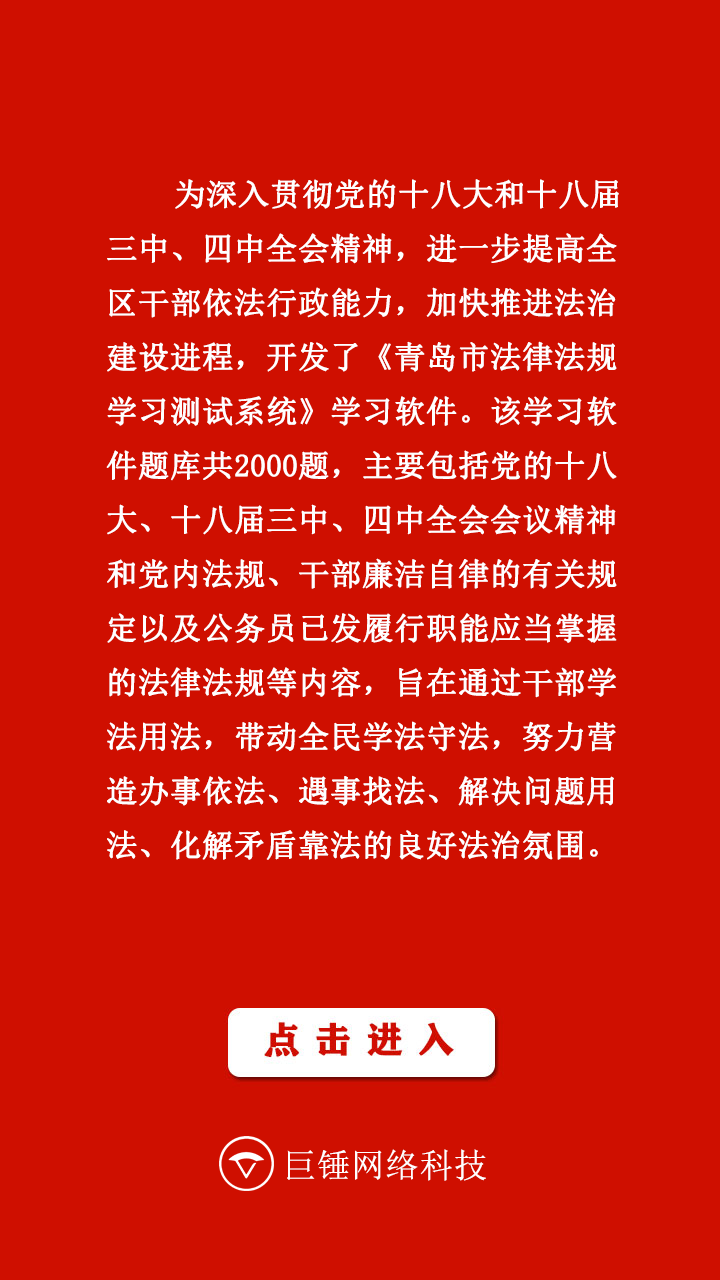
<style>
.page{position:relative;width:720px;height:1280px;background:#cf0f00}
.page>*{position:absolute;margin:0}
.t1{font:12px "SimSun";color:#ffffff}
.t2{font:33.8px "SimSun";color:#ffffff;font-weight:bold}
</style>
<div class="page">
<p class="t1" style="left:106px;top:179px;width:513px;height:681px">为深入贯彻党的十八大和十八届三中、四中全会精神，进一步提高全区干部依法行政能力，加快推进法治建设进程，开发了《青岛市法律法规学习测试系统》学习软件。该学习软件题库共2000题，主要包括党的十八大、十八届三中、四中全会会议精神和党内法规、干部廉洁自律的有关规定以及公务员已发履行职能应当掌握的法律法规等内容，旨在通过干部学法用法，带动全民学法守法，努力营造办事依法、遇事找法、解决问题用法、化解矛盾靠法的良好法治氛围。</p>
<p class="t2" style="left:287px;top:1149px;width:199px;height:32px">巨锤网络科技</p>
</div>
